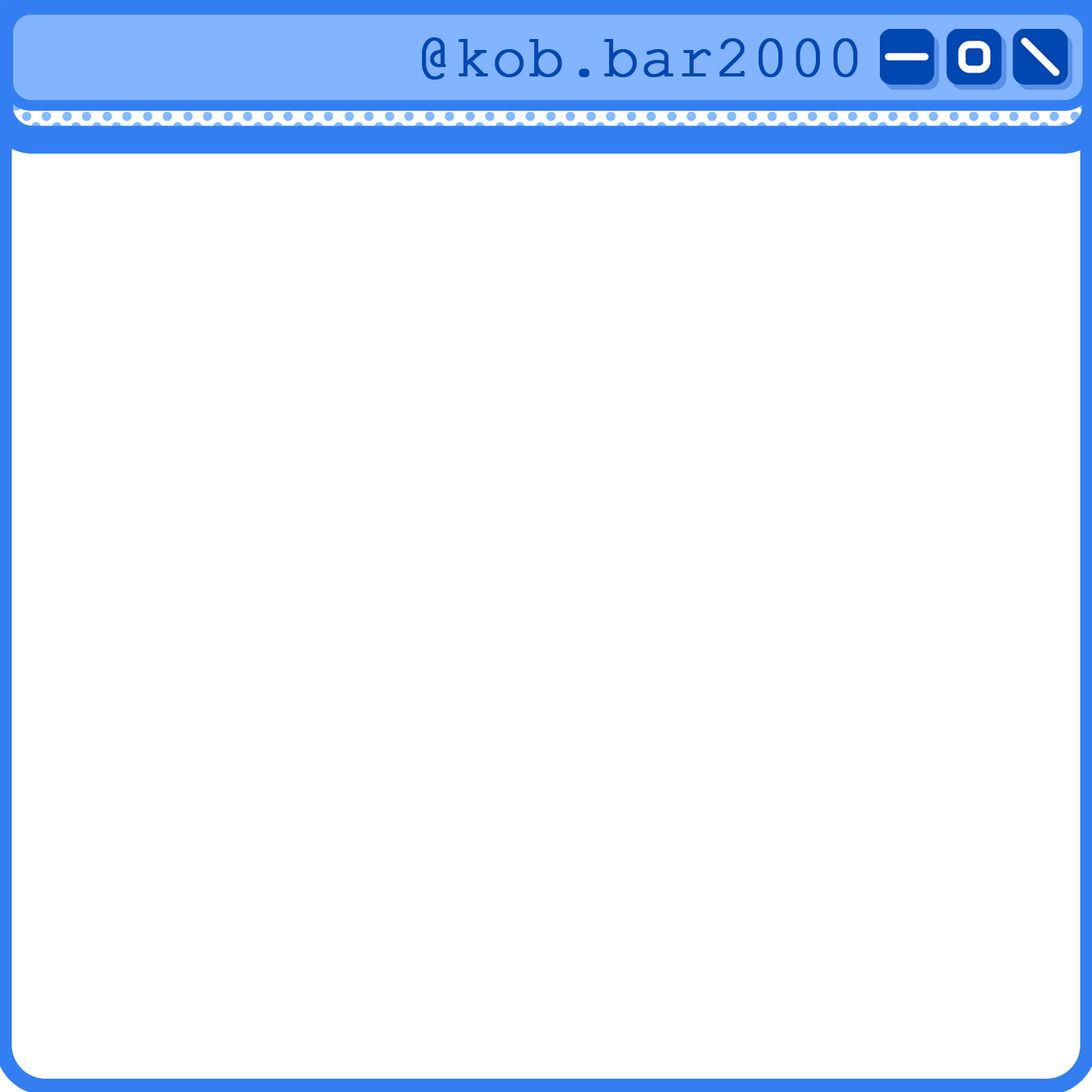
<style>
.page{position:relative;width:1092px;height:1092px;background:#ffffff}
.page>*{position:absolute;margin:0}
.t1{font:59.6px "CourierNewPSMT";color:#0047b2;font-weight:bold}
</style>
<div class="page">
<p class="t1" style="left:422px;top:37px;width:436px;height:43px">@kob.bar2000</p>
</div>
